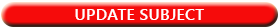
<style>
.page{position:relative;width:280px;height:28px;background:#f60b0b}
.page>*{position:absolute;margin:0}
.t1{font:16.4px "YuGothicUI-Bold";color:#ffffff}
</style>
<div class="page">
<p class="t1" style="left:75px;top:9px;width:129px;height:11px">UPDATE SUBJECT</p>
</div>
